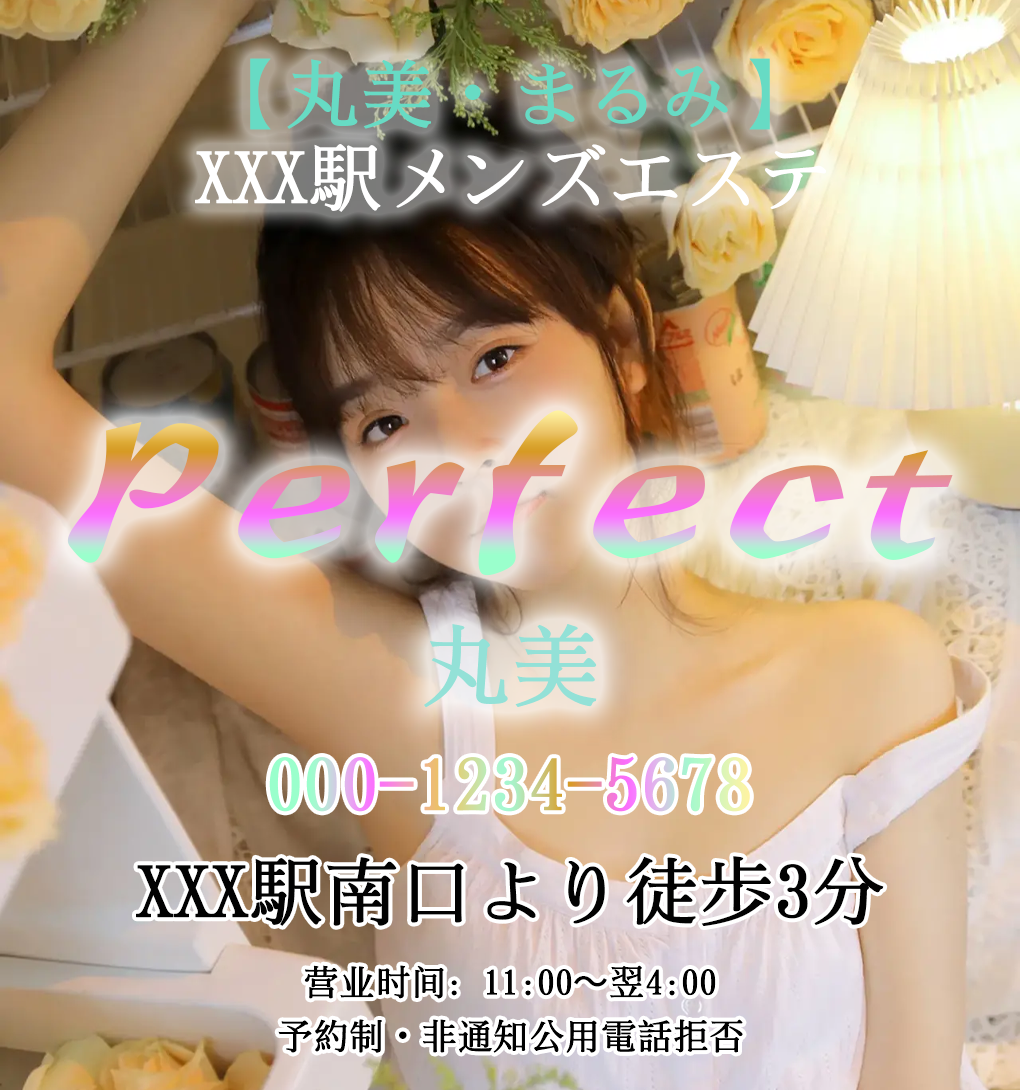
<style>
.page{position:relative;width:1020px;height:1090px}
.page>*{position:absolute;margin:0}
.t1{font:75px "SimSong-Bold";color:#67dbc4}
.t2{font:75px "KozGoPr6N-Regular";color:#67dbc4}
.t3{font:75px "SimSong-Bold";color:#ffffff}
.t4{font:90px "SimSong-Bold";color:#93e1d7}
.t5{font:75px "SimSong-Bold";color:#020202}
.t6{font:36px "SimSong-Bold";color:#000000}
.t7{font:36px "AdobeHeitiStd-Regular";color:#000000}
.t8{font:36px "KozGoPr6N-Regular";color:#000000}
</style>
<div class="page">
<p class="t1" style="left:250px;top:58px;width:520px;height:72px">【丸美<span class="t2">・</span>まるみ】</p>
<p class="t3" style="left:195px;top:144px;width:632px;height:68px">XXX駅メンズエステ</p>
<p class="t4" style="left:424px;top:624px;width:173px;height:84px">丸美</p>
<p class="t5" style="left:136px;top:856px;width:748px;height:70px">XXX駅南口より徒歩3分</p>
<p class="t6" style="left:304px;top:965px;width:412px;height:34px">营业时间：11:00<span class="t7">〜</span>翌4:00</p>
<p class="t6" style="left:278px;top:1019px;width:465px;height:34px">予約制<span class="t8">・</span>非通知公用電話拒否</p>
</div>
